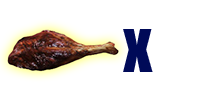
<style>
.page{position:relative;width:200px;height:100px;background:#ffffff}
.page>*{position:absolute;margin:0}
.t1{font:66.7px "Impact";color:#000a58}
</style>
<div class="page">
<p class="t1" style="left:123px;top:29px;width:30px;height:43px">x</p>
</div>
